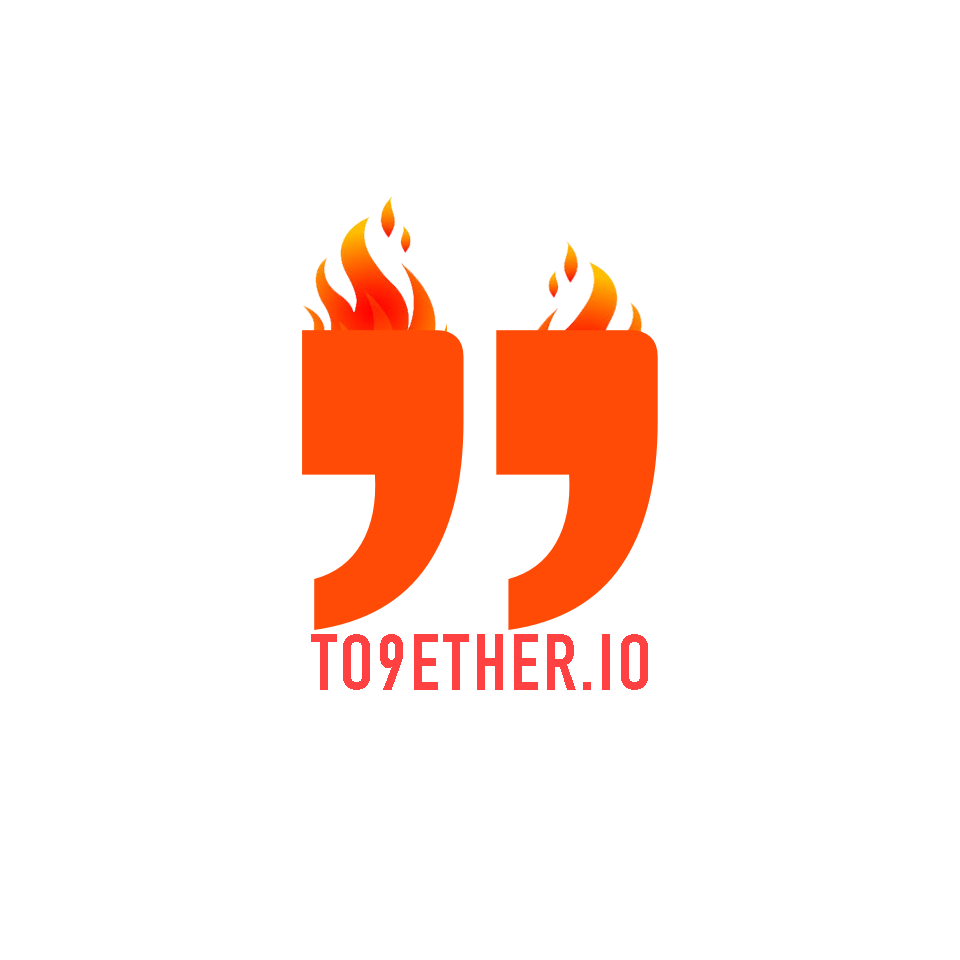
<style>
.page{position:relative;width:960px;height:960px;background:#ffffff}
.page>*{position:absolute;margin:0}
.t1{font:77.8px "DINCondensed-Bold";letter-spacing:0.05em;color:#ff4141}
</style>
<div class="page">
<p class="t1" style="left:311px;top:634px;width:337px;height:56px">TO9ETHER.IO</p>
</div>
